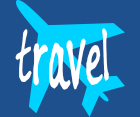
<style>
.page{position:relative;width:140px;height:117px;background:#1d508d}
.page>*{position:absolute;margin:0}
.t1{font:60px "BuxtonSketch";color:#ffffff;scale:0.78 1}
</style>
<div class="page">
<p class="t1" style="left:15px;top:28px;width:94px;height:62px">travel</p>
</div>
